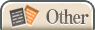
<style>
.page{position:relative;width:95px;height:30px}
.page>*{position:absolute;margin:0}
.t1{font:20px "RyuminPro-ExBold";letter-spacing:-0.08em;color:#6e6a64;scale:0.9 1}
</style>
<div class="page">
<p class="t1" style="left:46px;top:9px;width:43px;height:15px">Other</p>
</div>
